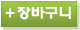
<style>
.page{position:relative;width:80px;height:30px}
.page>*{position:absolute;margin:0}
.t1{font:14px "HYwulB";color:#fefefe}
</style>
<div class="page">
<p class="t1" style="left:5px;top:7px;width:66px;height:13px">+장바구니</p>
</div>
